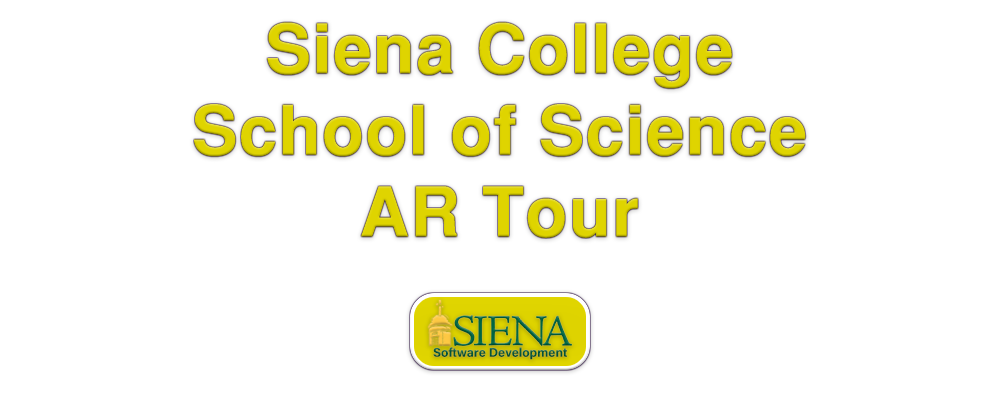
<style>
.page{position:relative;width:1000px;height:400px;background:#ffffff}
.page>*{position:absolute;margin:0}
.t1{font:67.9px "SansSerifBold";color:#dfd400;font-weight:bold}
.t2{font:12.7px "AcuminConcept-Bold";color:#006543;font-weight:bold}
</style>
<div class="page">
<p class="t1" style="left:194px;top:22px;width:612px;height:216px;text-align:center">Siena College<br>School of Science<br>AR Tour</p>
<p class="t2" style="left:433px;top:347px;width:134px;height:13px">Software Development</p>
</div>
